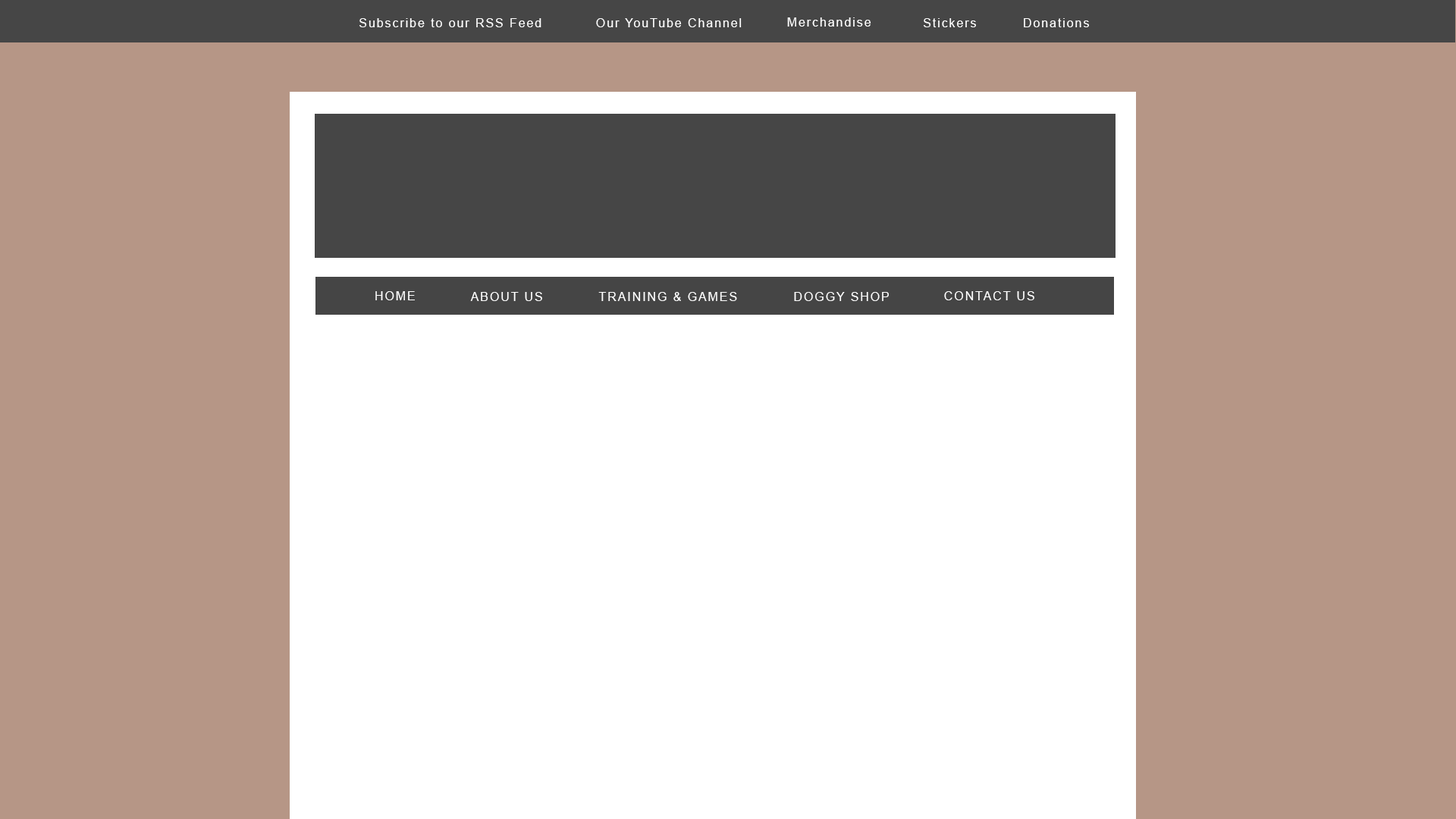
<style>
.page{position:relative;width:1456px;height:819px;background:#b69686}
.page>*{position:absolute;margin:0}
.t1{font:12.1px "ArialMT";letter-spacing:0.12em;color:#ffffff}
</style>
<div class="page">
<p class="t1" style="left:787px;top:17px;width:84px;height:10px">Merchandise</p>
<p class="t1" style="left:359px;top:18px;width:182px;height:9px">Subscribe to our RSS Feed</p>
<p class="t1" style="left:596px;top:18px;width:146px;height:9px">Our YouTube Channel</p>
<p class="t1" style="left:924px;top:18px;width:52px;height:9px">Stickers</p>
<p class="t1" style="left:1024px;top:18px;width:65px;height:9px">Donations</p>
<p class="t1" style="left:375px;top:291px;width:40px;height:9px">HOME</p>
<p class="t1" style="left:470px;top:292px;width:72px;height:9px">ABOUT US</p>
<p class="t1" style="left:598px;top:292px;width:139px;height:9px">TRAINING &amp; GAMES</p>
<p class="t1" style="left:794px;top:292px;width:95px;height:9px">DOGGY SHOP</p>
<p class="t1" style="left:944px;top:291px;width:90px;height:9px">CONTACT US</p>
</div>
